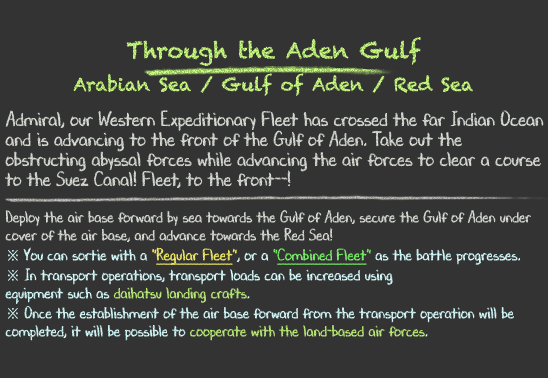
<style>
.page{position:relative;width:548px;height:378px;background:#333333}
.page>*{position:absolute;margin:0}
.t1{font:18px/36px "Chalkduster"}
.t2{font:22px/36px "Chalkduster"}
.t3{font:20px/20px "DJBChalkItUp";color:#d9ded6;scale:0.9 1}
.t4{font:16px/18px "DJBChalkItUp";color:#d9ded6;scale:0.9 1}
.t5{font:16px/20px "DJBChalkItUp";color:#d9ded6;scale:0.9 1}
.t6{font:16px/20px "TimesNewRomanPSMT";color:#d7feff;scale:0.9 1}
.t7{font:16px/20px "DJBChalkItUp";color:#d7feff;scale:0.9 1}
.t8{font:16px/20px "DJBChalkItUp";color:#f5ed68;scale:0.9 1}
.t9{font:16px/20px "DJBChalkItUp";color:#f5ed68;text-decoration:underline;scale:0.9 1}
.t10{font:16px/20px "DJBChalkItUp";color:#7bf26b;scale:0.9 1}
.t11{font:16px/20px "DJBChalkItUp";color:#7bf26b;text-decoration:underline;scale:0.9 1}
.t12{font:16px/18px "TimesNewRomanPSMT";color:#d7feff;scale:0.9 1}
.t13{font:16px/18px "DJBChalkItUp";color:#d7feff;scale:0.9 1}
.t14{font:16px/20px "DJBChalkItUp";color:#bdef78;scale:0.9 1}
.t15{font:16px/18px "DJBChalkItUp";color:#bdef78;scale:0.9 1}
</style>
<div class="page">
<p class="t1" style="left:73px;top:37px;width:400px;height:59px;text-align:center"><span class="t2">Through the Aden Gulf<br></span>Arabian Sea / Gulf of Aden / Red Sea</p>
<p class="t3" style="left:5px;top:110px;width:539px;height:231px">Admiral, our Western Expeditionary Fleet has crossed the far Indian Ocean<br>and is advancing to the front of the Gulf of Aden. Take out the<br>obstructing abyssal forces while advancing the air forces to clear a course<br>to the Suez Canal! Fleet, to the front--!<br><br><span class="t4">Deploy the air base forward by sea towards the Gulf of Aden, secure the Gulf of Aden under<br></span><span class="t5">cover of the air base, and advance towards the Red Sea!<br></span><span class="t6">※ </span><span class="t7">You can sortie with a </span><span class="t8">"</span><span class="t9">Regular Fleet</span><span class="t8">"</span><span class="t7">, or a </span><span class="t10">"</span><span class="t11">Combined Fleet</span><span class="t10">" </span><span class="t7">as the battle progresses.<br></span><span class="t12">※</span><span class="t13"> In transport operations, transport loads can be increased using<br></span><span class="t7">equipment such as </span><span class="t14">daihatsu landing crafts</span><span class="t7">.<br></span><span class="t12">※</span><span class="t13"> Once the establishment of the air base forward from the transport operation will be<br>completed, it will be possible to </span><span class="t15">cooperate with the land-based air forces</span><span class="t13">.</span></p>
</div>
